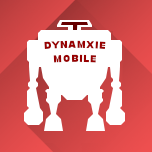
<style>
.page{position:relative;width:152px;height:152px;background:#ffffff}
.page>*{position:absolute;margin:0}
.t1{font:10px/14px "Arial-Black";color:#980101;text-transform:uppercase}
</style>
<div class="page">
<p class="t1" style="left:44px;top:40px;width:62px;height:23px;text-align:center">Dynamxie<br>Mobile</p>
</div>
